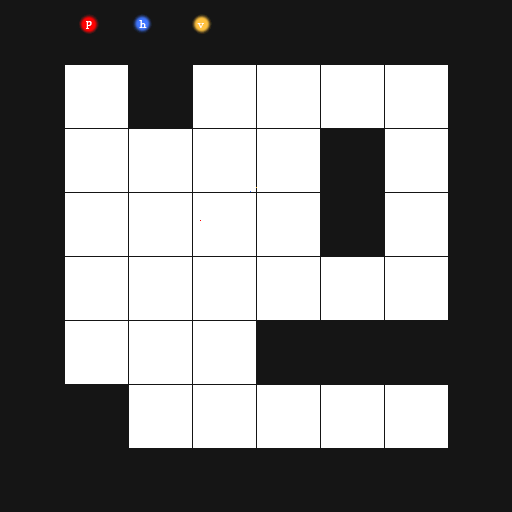
<style>
.page{position:relative;width:512px;height:512px;background:#151515}
.page>*{position:absolute;margin:0}
.t1{font:11px "Sylfaen";color:#ffffff}
.t2{font:12px "Sylfaen";color:#ffffff}
</style>
<div class="page">
<p class="t1" style="left:86px;top:21px;width:6px;height:8px">p</p>
<p class="t2" style="left:139px;top:20px;width:8px;height:8px">h</p>
<p class="t2" style="left:197px;top:23px;width:7px;height:5px">v</p>
</div>
